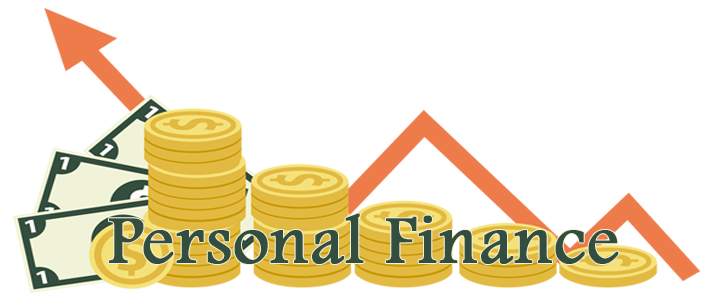
<style>
.page{position:relative;width:725px;height:300px;background:#ffffff}
.page>*{position:absolute;margin:0}
.t1{font:70px "FootlightMTLight";color:#334d3e;font-weight:bold}
</style>
<div class="page">
<p class="t1" style="left:109px;top:213px;width:510px;height:51px">Personal Finance</p>
</div>
